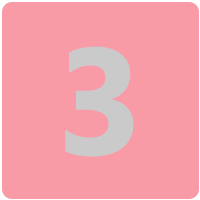
<style>
.page{position:relative;width:200px;height:200px;background:#f99aa7}
.page>*{position:absolute;margin:0}
.t1{font:150px "MicrosoftPhagsPa-Bold";letter-spacing:-0.038em;color:#cacaca;font-weight:bold}
</style>
<div class="page">
<p class="t1" style="left:65px;top:46px;width:69px;height:111px">3</p>
</div>
